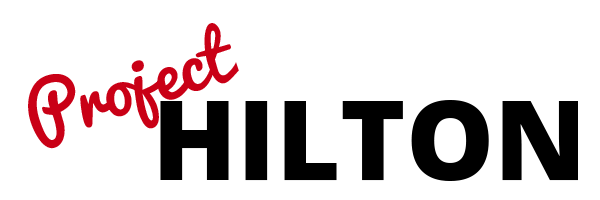
<style>
.page{position:relative;width:600px;height:200px;background:#ffffff}
.page>*{position:absolute;margin:0}
.t1{font:70px "Pacifico-Regular";color:#c90016}
.t2{font:111px "OpenSans-Extrabold";color:#000000}
</style>
<div class="page">
<p class="t1" style="left:28px;top:23px;width:211px;height:126px;rotate:-18deg">Project</p>
<p class="t2" style="left:160px;top:100px;width:418px;height:81px">HILTON</p>
</div>
